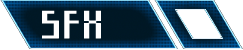
<style>
.page{position:relative;width:243px;height:50px;background:#ffffff}
.page>*{position:absolute;margin:0}
.t1{font:36.2px "Starcadia";color:#ffffff;font-weight:bold;scale:0.95 1}
</style>
<div class="page">
<p class="t1" style="left:42px;top:10px;width:59px;height:29px">SFX</p>
</div>
